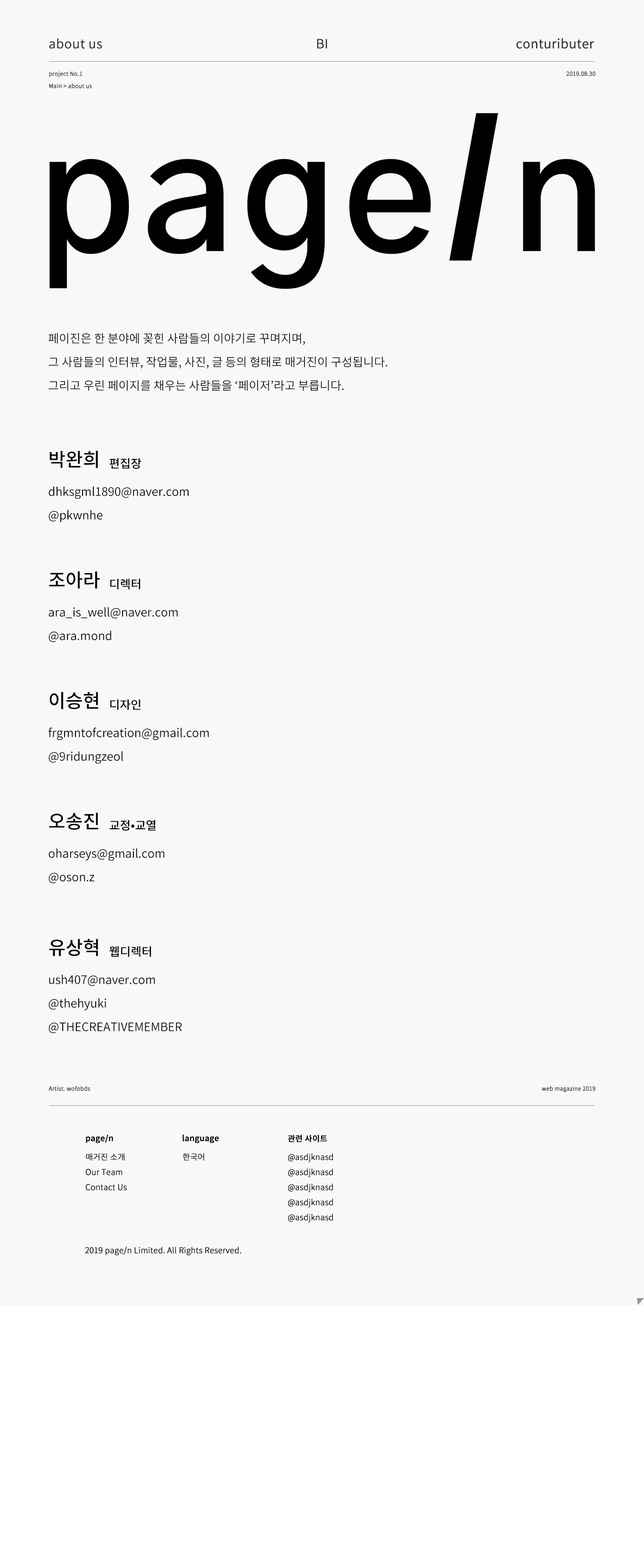
<style>
.page{position:relative;width:644px;height:1568px;background:#f8f8fa}
.page>*{position:absolute;margin:0}
.t1{font:12.7px "SourceHanSansK-Normal";color:#2f2f2f;font-weight:bold}
.t2{font:5.7px "SourceHanSansK-Normal";color:#2f2f2f;font-weight:bold}
.t3{font:11.8px/23.6px "SourceHanSansK-Normal";color:#000000}
.t4{font:18.8px "SourceHanSansK-Medium";color:#000000}
.t5{font:11.8px "SourceHanSansK-Medium";color:#000000}
.t6{font:8px "SourceHanSansK-Medium";color:#000000;font-weight:bold}
.t7{font:8px/15.1px "SourceHanSansK-Light";color:#000000;font-weight:bold}
.t8{font:8px "SourceHanSansK-Light";color:#000000;font-weight:bold}
</style>
<div class="page">
<p class="t1" style="left:49px;top:38px;width:53px;height:11px">about us</p>
<p class="t1" style="left:317px;top:39px;width:10px;height:10px">BI</p>
<p class="t1" style="left:516px;top:38px;width:78px;height:11px">contuributer</p>
<p class="t2" style="left:49px;top:71px;width:33px;height:6px">project No.1</p>
<p class="t2" style="left:566px;top:71px;width:29px;height:5px">2019.08.30</p>
<p class="t2" style="left:49px;top:83px;width:43px;height:6px">Main &gt; about us</p>
<p class="t3" style="left:49px;top:333px;width:338px;height:58px;text-align:justify">페이진은 한 분야에 꽂힌 사람들의 이야기로 꾸며지며,<br>그 사람들의 인터뷰, 작업물, 사진, 글 등의 형태로 매거진이 구성됩니다.<br>그리고 우린 페이지를 채우는 사람들을 ‘페이저’라고 부릅니다.</p>
<p class="t4" style="left:49px;top:450px;width:49px;height:18px">박완희</p>
<p class="t5" style="left:109px;top:458px;width:32px;height:11px">편집장</p>
<p class="t3" style="left:49px;top:486px;width:139px;height:37px;text-align:justify">dhksgml1890@naver.com<br>@pkwnhe</p>
<p class="t4" style="left:49px;top:571px;width:51px;height:17px">조아라</p>
<p class="t5" style="left:110px;top:579px;width:30px;height:10px">디렉터</p>
<p class="t3" style="left:49px;top:607px;width:129px;height:35px;text-align:justify">ara_is_well@naver.com<br>@ara.mond</p>
<p class="t4" style="left:49px;top:692px;width:49px;height:17px">이승현</p>
<p class="t5" style="left:110px;top:699px;width:30px;height:11px">디자인</p>
<p class="t3" style="left:49px;top:727px;width:160px;height:37px;text-align:justify">frgmntofcreation@gmail.com<br>@9ridungzeol</p>
<p class="t4" style="left:49px;top:813px;width:49px;height:17px">오송진</p>
<p class="t5" style="left:109px;top:820px;width:46px;height:11px">교정•교열</p>
<p class="t3" style="left:49px;top:848px;width:115px;height:35px;text-align:justify">oharseys@gmail.com<br>@oson.z</p>
<p class="t4" style="left:49px;top:939px;width:49px;height:17px">유상혁</p>
<p class="t5" style="left:109px;top:946px;width:42px;height:11px">웹디렉터</p>
<p class="t3" style="left:49px;top:974px;width:133px;height:59px;text-align:justify">ush407@naver.com<br>@thehyuki<br>@THECREATIVEMEMBER</p>
<p class="t2" style="left:49px;top:1086px;width:41px;height:5px">Artist. wofobds</p>
<p class="t2" style="left:541px;top:1086px;width:54px;height:6px">web magazine 2019</p>
<p class="t6" style="left:86px;top:1135px;width:27px;height:8px">page/n</p>
<p class="t6" style="left:182px;top:1135px;width:37px;height:8px">language</p>
<p class="t6" style="left:287px;top:1135px;width:40px;height:8px">관련 사이트</p>
<p class="t7" style="left:86px;top:1153px;width:41px;height:38px">매거진 소개<br>Our Team<br>Contact Us</p>
<p class="t8" style="left:183px;top:1153px;width:21px;height:8px">한국어</p>
<p class="t7" style="left:288px;top:1153px;width:45px;height:70px">@asdjknasd<br>@asdjknasd<br>@asdjknasd<br>@asdjknasd<br>@asdjknasd</p>
<p class="t8" style="left:85px;top:1247px;width:156px;height:9px">2019 page/n Limited. All Rights Reserved.</p>
</div>
